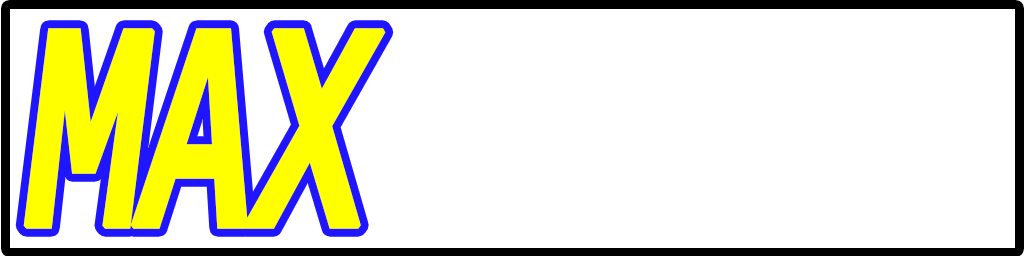
<style>
.page{position:relative;width:1024px;height:256px;background:#ffffff}
.page>*{position:absolute;margin:0}
.t1{font:268px "InputMono-Medium";letter-spacing:-0.07em;color:#ffff00;font-weight:bold;font-style:italic;scale:0.7 1}
</style>
<div class="page">
<p class="t1" style="left:23px;top:28px;width:363px;height:201px">MAX</p>
</div>
